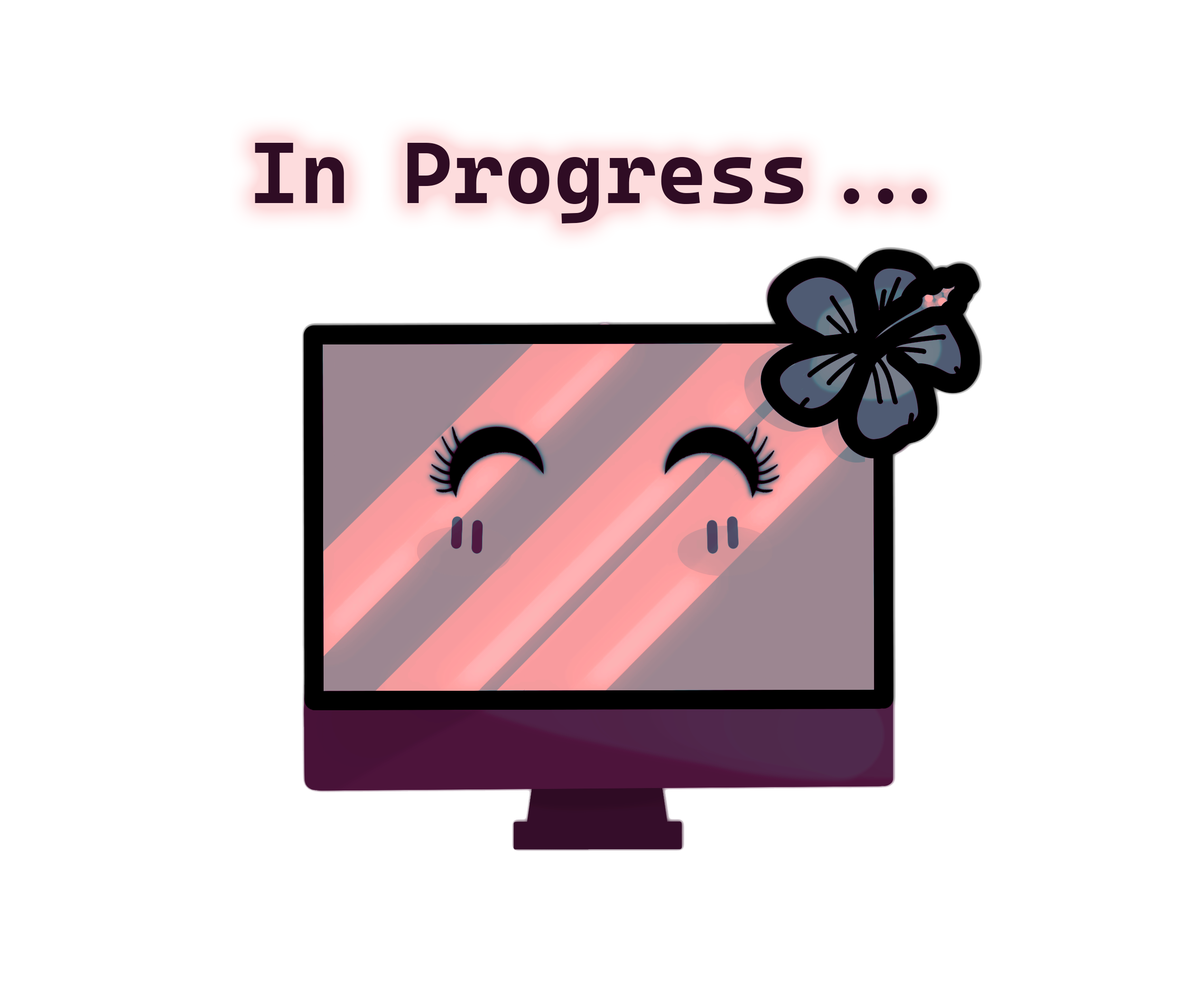
<style>
.page{position:relative;width:1190px;height:1002px;background:#ffffff}
.page>*{position:absolute;margin:0}
.t1{font:87px "CascadiaCode-Bold";color:#2f0c24}
</style>
<div class="page">
<p class="t1" style="left:255px;top:143px;width:672px;height:80px">In Progress...</p>
</div>
